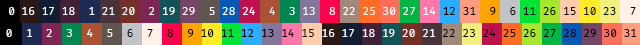
<style>
.page{position:relative;width:640px;height:45px}
.page>*{position:absolute;margin:0}
.t1{font:10.9px "FiraCode-Regular";color:#ffffff}
.t2{font:10.9px "FiraCode-Regular";color:#000000}
</style>
<div class="page">
<p class="t1" style="left:9px;top:7px;width:627px;height:8px">0 16 17 18  1 21 20  2 19 29  5 28 24  4  3 13  8 22 25 30 27 14 <span class="t2">12 31  9  6 11 26 15 10 23  7</span></p>
</div>
